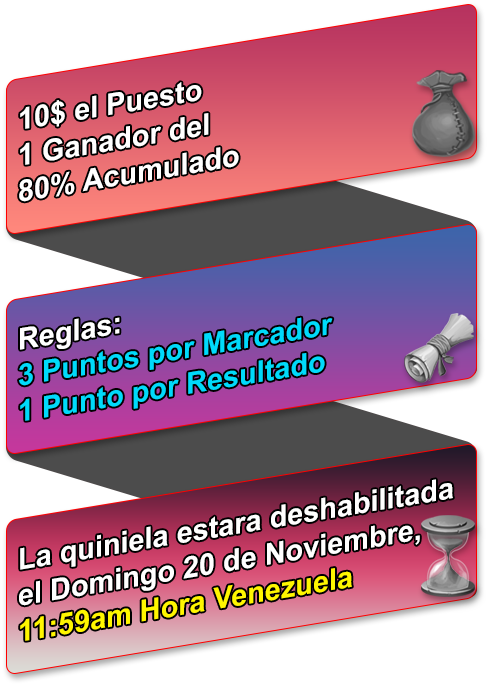
<style>
.page{position:relative;width:493px;height:687px;background:#ffffff}
.page>*{position:absolute;margin:0}
.t1{font:30px "Arial-BoldMT";color:#ffffff}
.t2{font:30px "Arial-BoldMT";color:#00dafa}
.t3{font:30px "Arial-BoldMT";color:#fff600}
</style>
<div class="page">
<p class="t1" style="left:19px;top:82px;width:220px;height:120px;rotate:-9deg">10$ el Puesto<br>1 Ganador del <br>80% Acumulado</p>
<p class="t2" style="left:19px;top:317px;width:314px;height:104px;rotate:-9deg"><span class="t1">Reglas:<br></span>3 Puntos por Marcador<br>1 Punto por Resultado</p>
<p class="t1" style="left:19px;top:479px;width:434px;height:162px;rotate:-9deg">La quiniela estara deshabilitada<br>el Domingo 20 de Noviembre, <br><span class="t3">11:59am Hora Venezuela</span></p>
</div>
